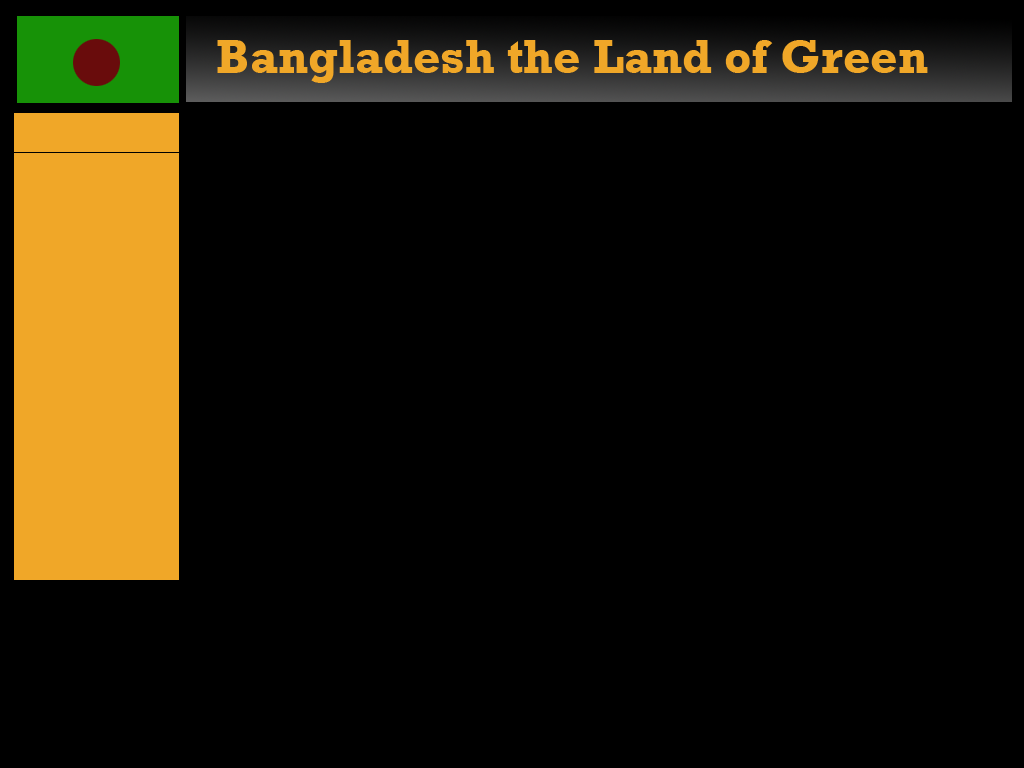
<style>
.page{position:relative;width:1024px;height:768px;background:#000000}
.page>*{position:absolute;margin:0}
.t1{font:48px "Rockwell-Bold";color:#f0a728}
</style>
<div class="page">
<p class="t1" style="left:217px;top:40px;width:711px;height:43px">Bangladesh the Land of Green</p>
</div>
